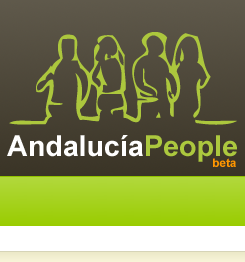
<style>
.page{position:relative;width:245px;height:262px}
.page>*{position:absolute;margin:0}
.t1{font:28.6px "Arial-BoldMT";color:#ffffff}
.t2{font:28.6px "Arial-BoldMT";color:#acc83e}
.t3{font:11.9px "Arial-BoldMT";color:#ff9600}
</style>
<div class="page">
<p class="t1" style="left:7px;top:135px;width:230px;height:27px">Andalucía<span class="t2">People</span></p>
<p class="t3" style="left:213px;top:158px;width:23px;height:9px">beta</p>
</div>
